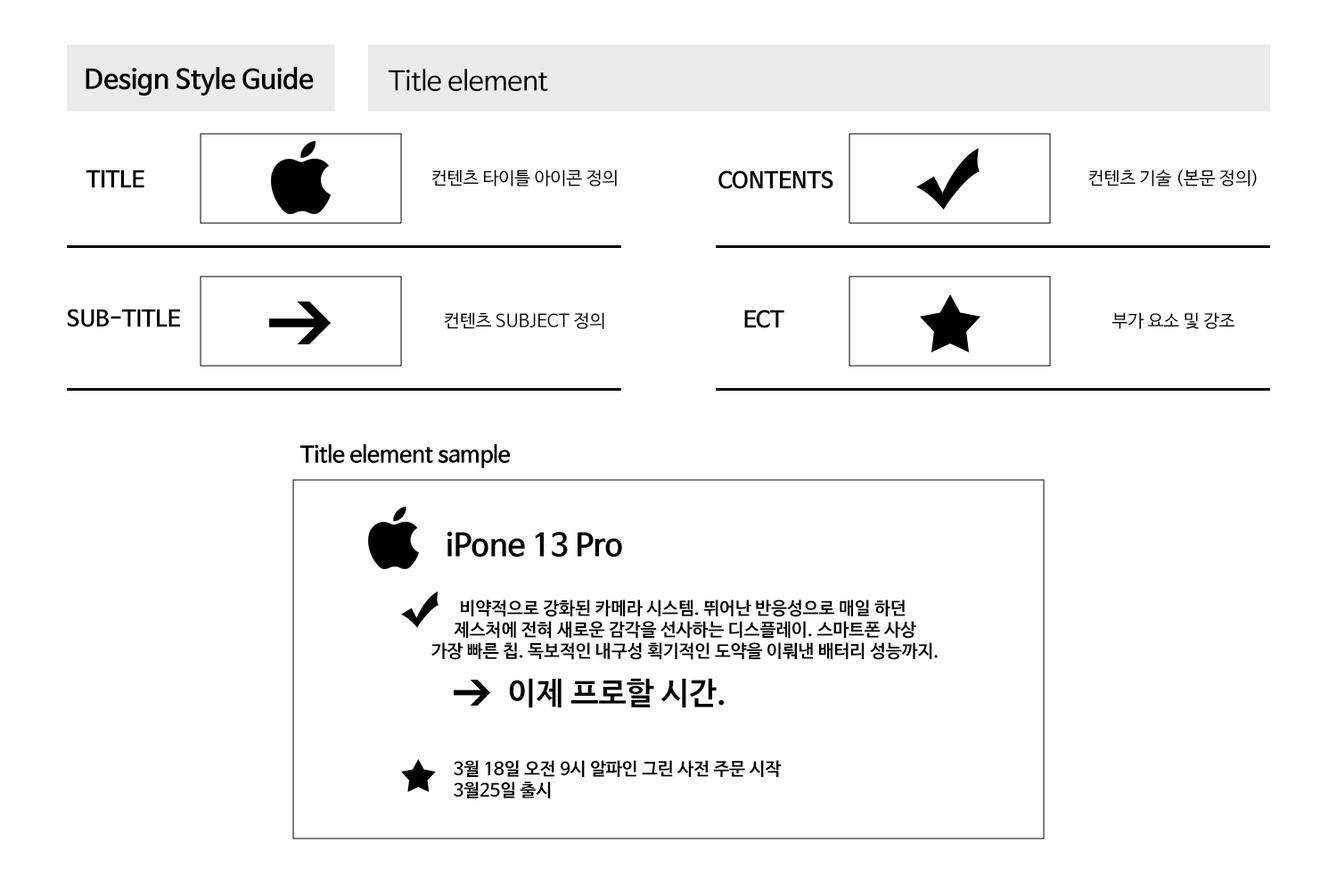
<style>
.page{position:relative;width:1337px;height:892px;background:#ffffff}
.page>*{position:absolute;margin:0}
.t1{font:26.7px "NanumBarunGothicBold";color:#000000}
.t2{font:26.7px "NanumBarunGothic";color:#000000}
.t3{font:22.3px "NanumBarunGothicBold";color:#000000}
.t4{font:17.8px "NanumBarunGothic";color:#000000}
.t5{font:31.2px "NanumBarunGothicBold";color:#000000}
.t6{font:17.8px "NanumBarunGothicBold";color:#000000}
</style>
<div class="page">
<p class="t1" style="left:86px;top:67px;width:228px;height:29px">Design Style Guide</p>
<p class="t2" style="left:388px;top:69px;width:160px;height:23px">Title element</p>
<p class="t3" style="left:86px;top:169px;width:58px;height:19px">TITLE</p>
<p class="t4" style="left:432px;top:169px;width:185px;height:17px">컨텐츠 타이틀 아이콘 정의</p>
<p class="t3" style="left:719px;top:170px;width:115px;height:19px">CONTENTS</p>
<p class="t4" style="left:1089px;top:169px;width:168px;height:17px">컨텐츠 기술 (본문 정의)</p>
<p class="t3" style="left:68px;top:308px;width:112px;height:19px">SUB-TITLE</p>
<p class="t4" style="left:444px;top:312px;width:161px;height:17px">컨텐츠 SUBJECT 정의</p>
<p class="t3" style="left:744px;top:309px;width:41px;height:19px">ECT</p>
<p class="t4" style="left:1112px;top:312px;width:123px;height:17px">부가 요소 및 강조</p>
<p class="t3" style="left:300px;top:444px;width:211px;height:24px">Title element sample</p>
<p class="t5" style="left:447px;top:531px;width:175px;height:26px">iPone 13 Pro</p>
<p class="t6" style="left:432px;top:599px;width:506px;height:61px;text-align:center">비약적으로 강화된 카메라 시스템. 뛰어난 반응성으로 매일 하던 <br>제스처에 전혀 새로운 감각을 선사하는 디스플레이. 스마트폰 사상<br>가장 빠른 칩. 독보적인 내구성 획기적인 도약을 이뤄낸 배터리 성능까지.</p>
<p class="t5" style="left:509px;top:678px;width:216px;height:30px">이제 프로할 시간.</p>
<p class="t6" style="left:454px;top:760px;width:328px;height:38px">3월 18일 오전 9시 알파인 그린 사전 주문 시작<br>3월25일 출시</p>
</div>
